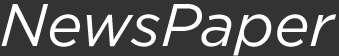
<style>
.page{position:relative;width:339px;height:56px;background:#333333}
.page>*{position:absolute;margin:0}
.t1{font:60px "Gotham-BookItalic";color:#ffffff}
</style>
<div class="page">
<p class="t1" style="left:1px;top:4px;width:335px;height:52px">NewsPaper</p>
</div>
